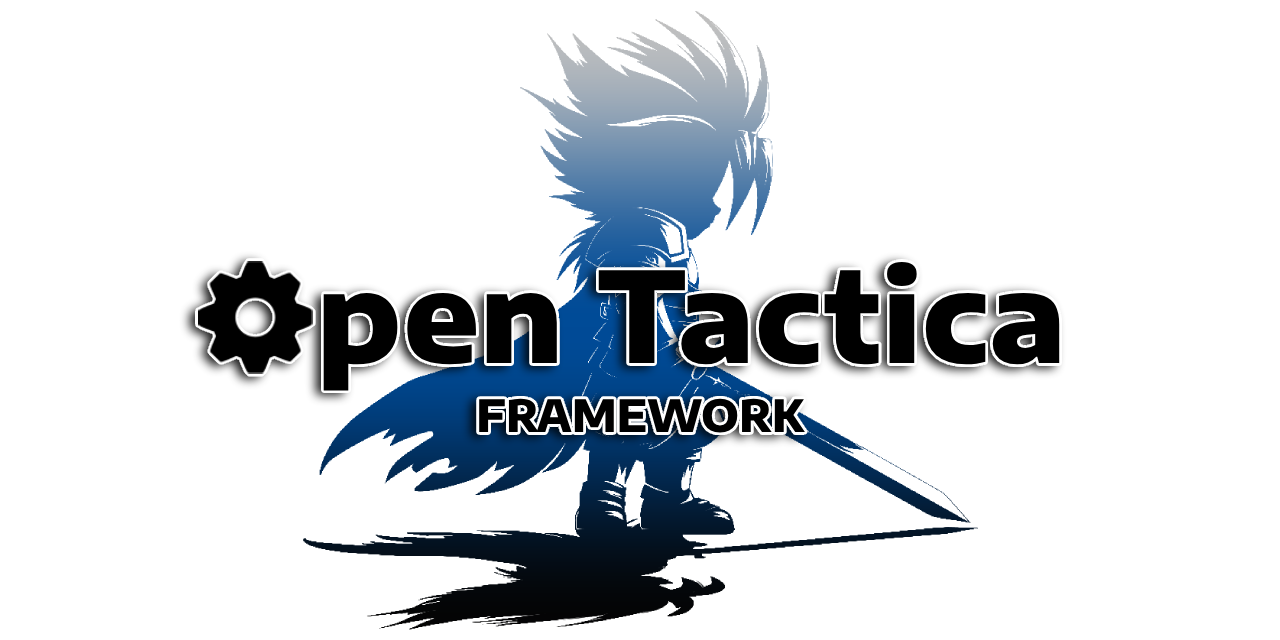
<style>
.page{position:relative;width:1280px;height:640px;background:#ffffff}
.page>*{position:absolute;margin:0}
.t1{font:125.5px "EncodeSansSemiExpanded-ExtraBold";color:#000000}
.t2{font:44.3px "EncodeSansSemiExpanded-ExtraBold";color:#000000}
</style>
<div class="page">
<p class="t1" style="left:323px;top:261px;width:737px;height:172px;text-align:center">pen Tactica<br><span class="t2">FRAMEWORK</span></p>
</div>
